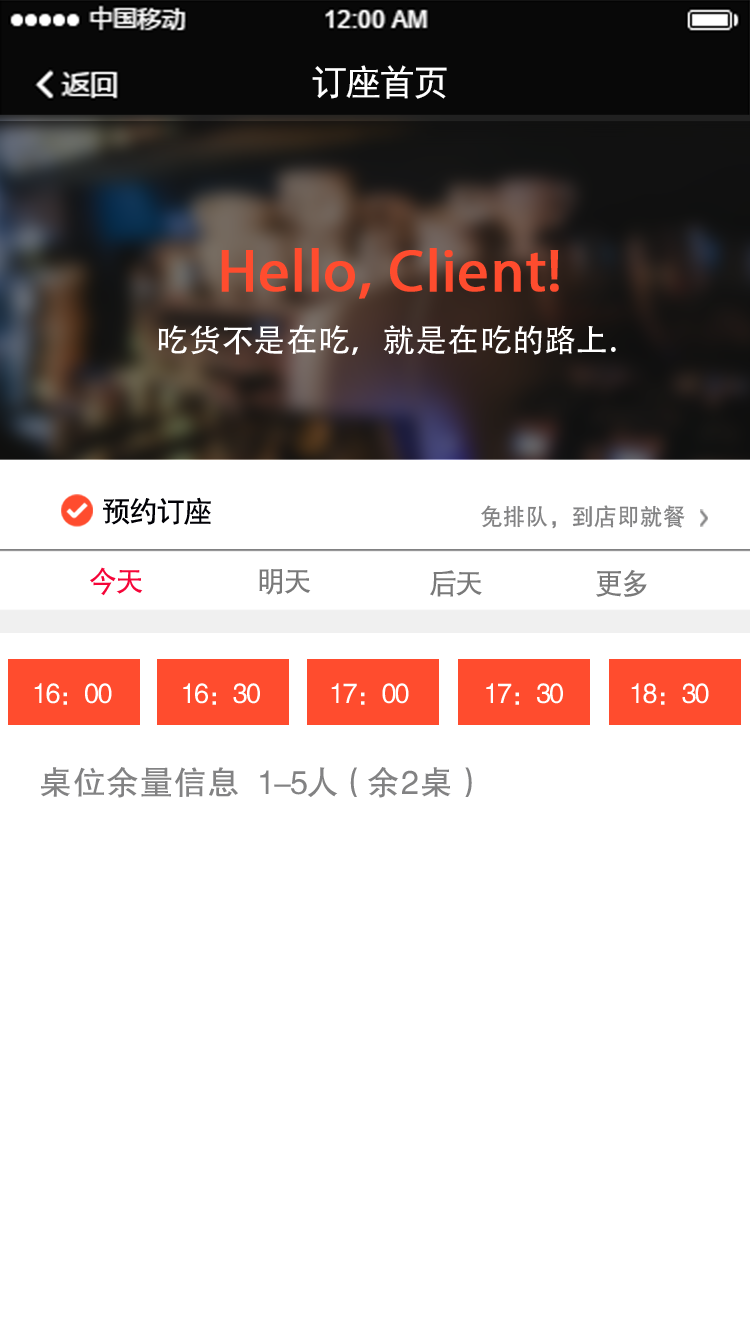
<style>
.page{position:relative;width:750px;height:1334px;background:#ffffff}
.page>*{position:absolute;margin:0}
.t1{font:36px "SimHei";letter-spacing:-0.06em;color:#ffffff}
.t2{font:60px "MyriadPro-Regular";letter-spacing:0.01em;color:#ff4c2e;font-weight:bold}
.t3{font:32px "AdobeHeitiStd-Regular";letter-spacing:0.01em;color:#ffffff}
.t4{font:30px "FZHTK--GBK1-0";letter-spacing:-0.06em;color:#000005;scale:0.97 1}
.t5{font:24px "FZHTK--GBK1-0";letter-spacing:0.02em;color:#818182;scale:0.93 1}
.t6{font:30px "FZHTK--GBK1-0";letter-spacing:-0.06em;color:#f50538;scale:0.93 1}
.t7{font:30px "FZHTK--GBK1-0";letter-spacing:-0.06em;color:#818182;scale:0.93 1}
.t8{font:28px "FZHTK--GBK1-0";letter-spacing:-0.06em;color:#ffffff;scale:0.97 1}
.t9{font:33.3px "FZHTK--GBK1-0";letter-spacing:0.02em;color:#828283}
.t10{font:33.3px "FZHTK--GBK1-0";letter-spacing:-0.06em;color:#818182}
.t11{font:33.3px "FZHTK--GBK1-0";letter-spacing:0.04em;color:#818182}
</style>
<div class="page">
<p class="t1" style="left:312px;top:65px;width:135px;height:34px">订座首页</p>
<p class="t2" style="left:221px;top:248px;width:338px;height:51px">Hello, Client!</p>
<p class="t3" style="left:158px;top:324px;width:458px;height:31px">吃货不是在吃，就是在吃的路上.</p>
<p class="t4" style="left:103px;top:497px;width:108px;height:28px">预约订座</p>
<p class="t5" style="left:481px;top:505px;width:204px;height:24px">免排队，到店即就餐</p>
<p class="t6" style="left:90px;top:567px;width:53px;height:29px">今天</p>
<p class="t7" style="left:259px;top:569px;width:52px;height:26px">明天</p>
<p class="t7" style="left:596px;top:569px;width:51px;height:28px">更多</p>
<p class="t7" style="left:430px;top:570px;width:52px;height:27px">后天</p>
<p class="t8" style="left:34px;top:683px;width:78px;height:22px">16：00</p>
<p class="t8" style="left:183px;top:683px;width:77px;height:22px">16：30</p>
<p class="t8" style="left:331px;top:683px;width:78px;height:22px">17：00</p>
<p class="t8" style="left:486px;top:683px;width:77px;height:22px">17：30</p>
<p class="t8" style="left:631px;top:683px;width:78px;height:22px">18：30</p>
<p class="t9" style="left:41px;top:767px;width:197px;height:31px">桌位余量信息</p>
<p class="t10" style="left:260px;top:767px;width:212px;height:31px">1-5人（<span class="t11">余2桌</span>）</p>
</div>
